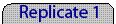
<style>
.page{position:relative;width:116px;height:24px;background:#cccccc}
.page>*{position:absolute;margin:0}
.t1{font:18px "MyriadPro-Regular";color:#000094}
.t2{font:14px "MyriadPro-Regular";color:#000000}
</style>
<div class="page">
<p class="t1" style="left:20px;top:5px;width:78px;height:17px"><span class="t2">   </span>Replicate 1</p>
</div>
